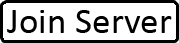
<style>
.page{position:relative;width:179px;height:43px;background:#ffffff}
.page>*{position:absolute;margin:0}
.t1{font:37.3px "Calibri";color:#000000}
</style>
<div class="page">
<p class="t1" style="left:7px;top:10px;width:165px;height:23px">Join Server</p>
</div>
